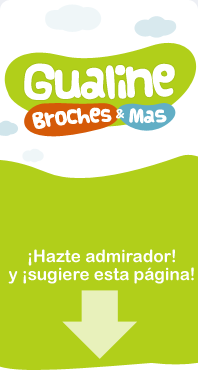
<style>
.page{position:relative;width:198px;height:380px;background:#b1cf1a}
.page>*{position:absolute;margin:0}
.t1{font:36.2px "Vanilla";letter-spacing:-0.08em;color:#ffffff}
.t2{font:16.8px "Vanilla";letter-spacing:-0.04em;color:#ffffff}
.t3{font:14.7px "Vanilla";letter-spacing:-0.04em;color:#ffffff}
.t4{font:11.2px "Vanilla";letter-spacing:-0.04em;color:#ffffff}
.t5{font:14.5px "Vanilla";letter-spacing:-0.04em;color:#ffffff}
.t6{font:17px/18px "ArialRoundedMTBold";color:#ffffff}
</style>
<div class="page">
<p class="t1" style="left:24px;top:63px;width:151px;height:37px;rotate:-1deg">Gualine</p>
<p class="t2" style="left:32px;top:107px;width:80px;height:22px;rotate:-5deg">Broche<span class="t3">s</span></p>
<p class="t4" style="left:116px;top:109px;width:9px;height:10px;rotate:-3deg"><span class="t5"> </span>&amp;</p>
<p class="t5" style="left:129px;top:108px;width:38px;height:16px;rotate:-1deg">Mas</p>
<p class="t6" style="left:8px;top:249px;width:186px;height:35px;text-align:center">¡Hazte admirador!<br>y ¡sugiere esta página!</p>
</div>
